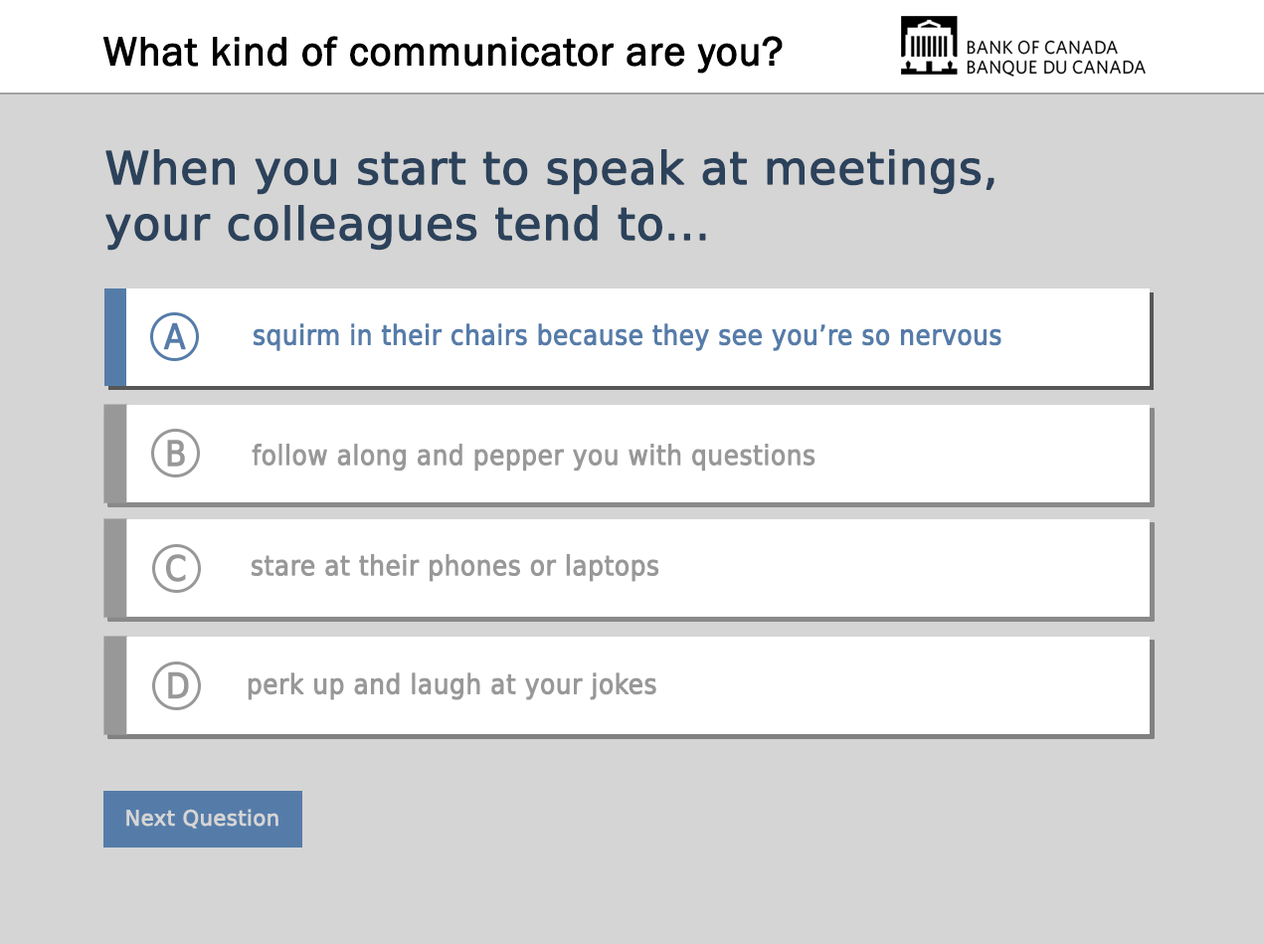
<style>
.page{position:relative;width:1264px;height:944px;background:#d5d5d5}
.page>*{position:absolute;margin:0}
.t1{font:41.5px "FranklinGothic-Book";color:#010000;font-weight:bold}
.t2{font:45px/55.7px "DejaVuSans";color:#2c425b;font-weight:bold}
.t3{font:34.6px "DejaVuSansCondensed";color:#557ca9;font-weight:bold}
.t4{font:27.1px "DejaVuSansCondensed";color:#557ca9;font-weight:bold}
.t5{font:34.6px "DejaVuSansCondensed";color:#989898;font-weight:bold}
.t6{font:27.1px "DejaVuSansCondensed";color:#989898;font-weight:bold}
.t7{font:20.8px "DejaVuSans";color:#d5d5d5;font-weight:bold}
</style>
<div class="page">
<p class="t1" style="left:102px;top:36px;width:681px;height:38px">What kind of communicator are you?</p>
<p class="t2" style="left:105px;top:149px;width:889px;height:102px">When you start to speak at meetings, <br>your colleagues tend to...</p>
<p class="t3" style="left:163px;top:322px;width:23px;height:28px">A</p>
<p class="t4" style="left:254px;top:323px;width:747px;height:28px">squirm in their chairs because they see you’re so nervous</p>
<p class="t5" style="left:167px;top:439px;width:18px;height:27px">B</p>
<p class="t6" style="left:252px;top:443px;width:563px;height:28px">follow along and pepper you with questions</p>
<p class="t5" style="left:166px;top:554px;width:20px;height:28px">C</p>
<p class="t6" style="left:252px;top:554px;width:406px;height:28px">stare at their phones or laptops</p>
<p class="t5" style="left:168px;top:671px;width:21px;height:28px">D</p>
<p class="t6" style="left:248px;top:672px;width:408px;height:28px">perk up and laugh at your jokes</p>
<p class="t7" style="left:126px;top:808px;width:152px;height:20px">Next Question</p>
</div>
